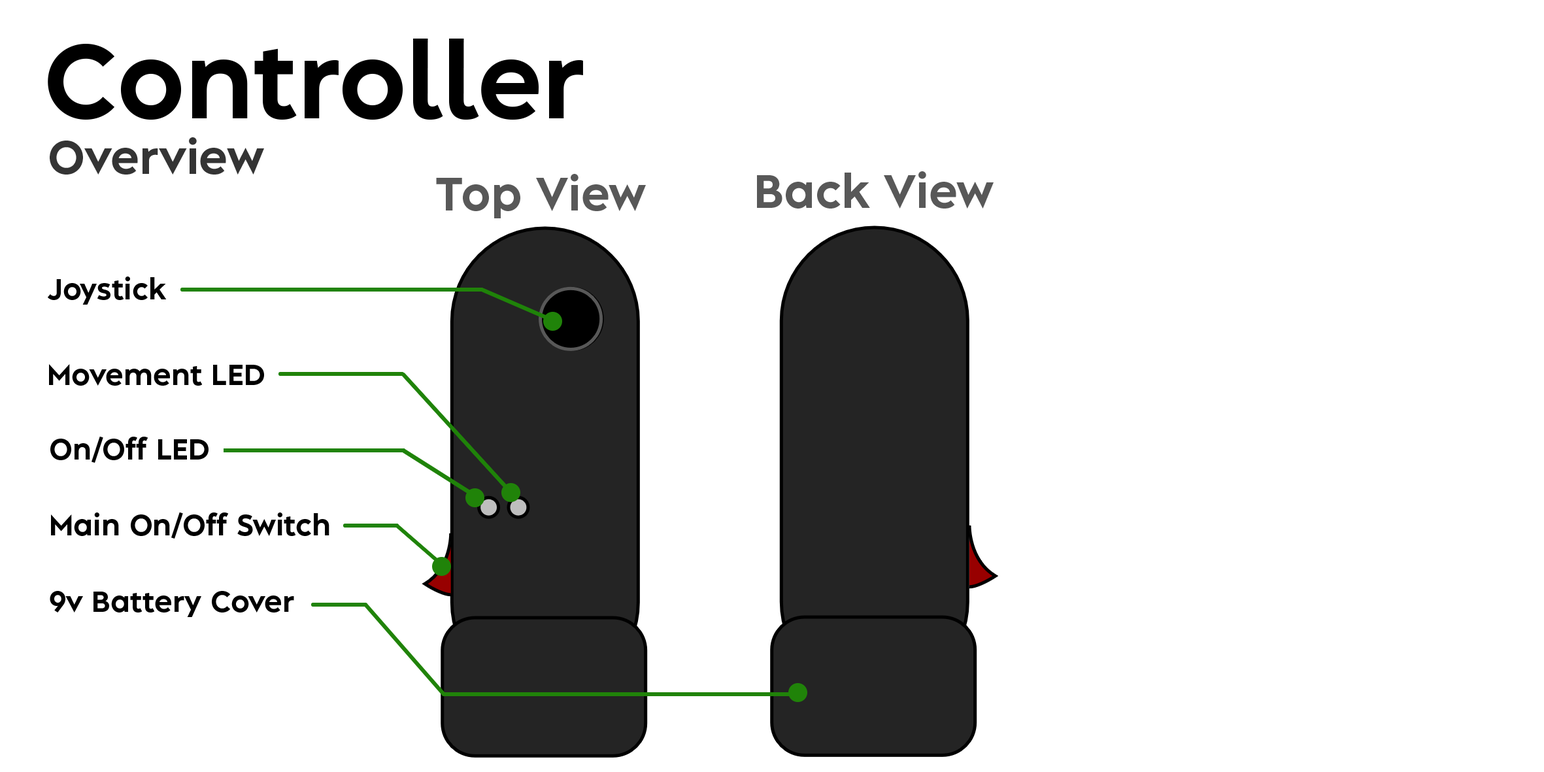
<style>
.page{position:relative;width:1544px;height:772px;background:#ffffff}
.page>*{position:absolute;margin:0}
.t1{font:98.1px "AlbulaPro-Bold";color:#000000}
.t2{font:43.6px "AlbulaPro-Bold";color:#343434}
.t3{font:43.6px "AlbulaPro-Bold";color:#585858}
.t4{font:27.2px "AlbulaPro-Bold";color:#000000}
</style>
<div class="page">
<p class="t1" style="left:48px;top:39px;width:535px;height:81px">Controller</p>
<p class="t2" style="left:50px;top:137px;width:214px;height:38px">Overview</p>
<p class="t3" style="left:436px;top:174px;width:210px;height:44px">Top View</p>
<p class="t3" style="left:757px;top:171px;width:237px;height:38px">Back View</p>
<p class="t4" style="left:48px;top:277px;width:119px;height:28px">Joystick</p>
<p class="t4" style="left:49px;top:364px;width:215px;height:22px">Movement LED</p>
<p class="t4" style="left:50px;top:436px;width:159px;height:27px">On/Off LED</p>
<p class="t4" style="left:51px;top:512px;width:279px;height:27px">Main On/Off Switch</p>
<p class="t4" style="left:50px;top:591px;width:244px;height:26px">9v Battery Cover</p>
</div>
